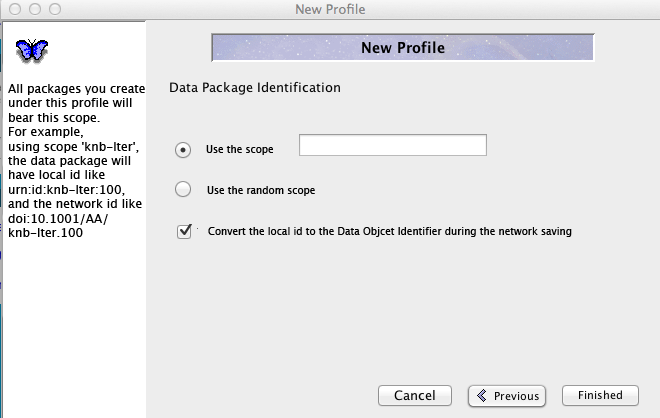
<style>
.page{position:relative;width:660px;height:418px;background:#ededed}
.page>*{position:absolute;margin:0}
.t1{font:12px "LucidaGrande";color:#000000}
.t2{font:10px "LucidaGrande";color:#000000}
</style>
<div class="page">
<p class="t1" style="left:8px;top:84px;width:137px;height:153px">All packages you create <br>under this profile will <br>bear this scope. <br>For example, <br>using scope 'knb-lter', <br>the data package will <br>have local id like <br>urn:id:knb-lter:100, <br>and the network id like<br>doi:10.1001/AA/<br>knb-lter.100</p>
<p class="t2" style="left:206px;top:145px;width:67px;height:10px">Use the scope</p>
<p class="t2" style="left:207px;top:186px;width:108px;height:10px">Use the random scope</p>
<p class="t2" style="left:208px;top:227px;width:364px;height:10px">Convert the local id to the Data Objcet Identifier during the network saving</p>
</div>
